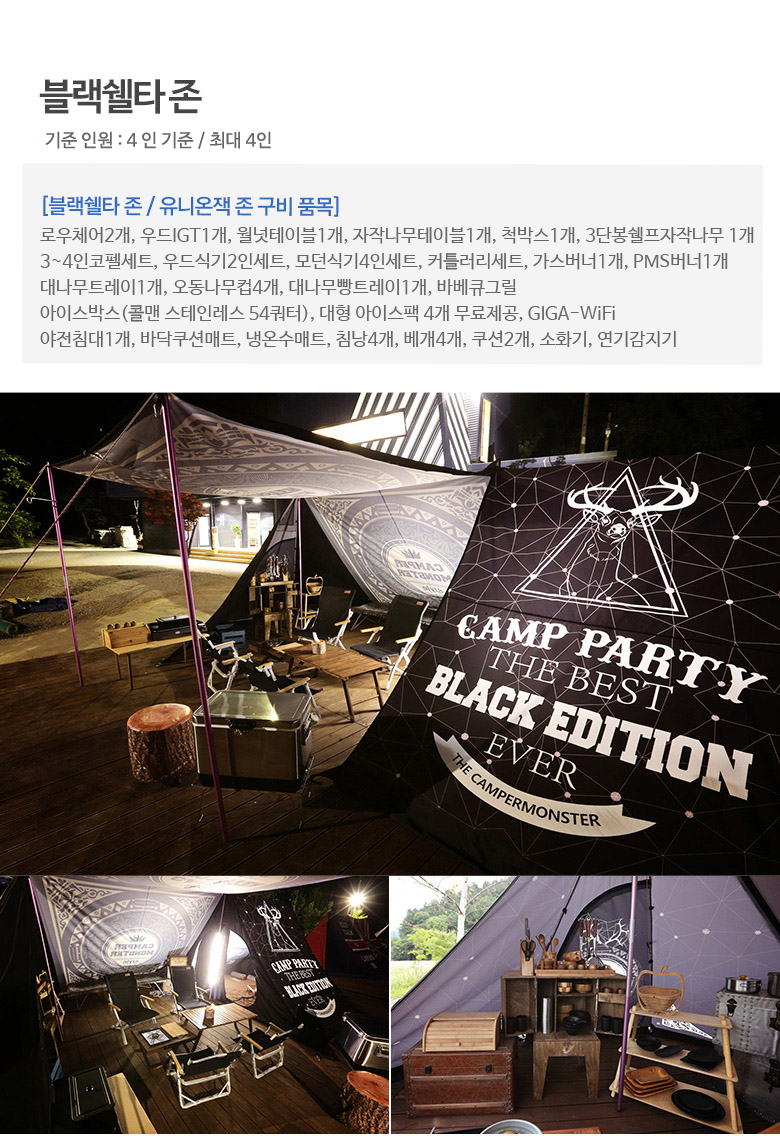
<style>
.page{position:relative;width:780px;height:1136px}
.page>*{position:absolute;margin:0}
.t1{font:18px "NanumBarunGothic";color:#666666}
.t2{font:18px/26px "NanumBarunGothic";color:#666666}
</style>
<div class="page">
<p class="t1" style="left:45px;top:131px;width:226px;height:18px">기준 인원 : 4 인 기준 / 최대 4인</p>
<p class="t2" style="left:40px;top:227px;width:714px;height:121px">로우체어2개, 우드IGT1개, 월넛테이블1개, 자작나무테이블1개, 척박스1개, 3단봉쉘프자작나무 1개<br>3~4인코펠세트, 우드식기2인세트, 모던식기4인세트, 커틀러리세트, 가스버너1개, PMS버너1개<br>대나무트레이1개, 오동나무컵4개, 대나무빵트레이1개, 바베큐그릴<br>아이스박스(콜맨 스테인레스 54쿼터), 대형 아이스팩 4개 무료제공, GIGA-WiFi<br>야전침대1개, 바닥쿠션매트, 냉온수매트, 침낭4개, 베개4개, 쿠션2개, 소화기, 연기감지기</p>
</div>
